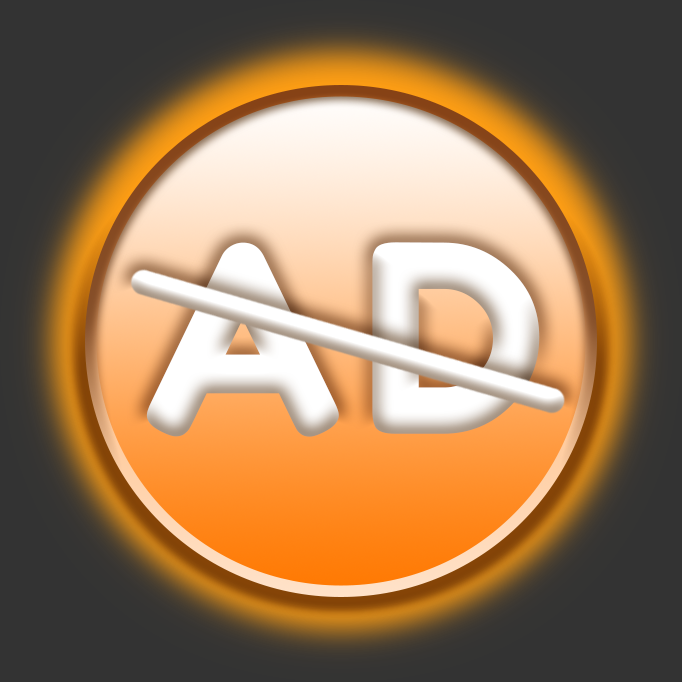
<style>
.page{position:relative;width:682px;height:682px}
.page>*{position:absolute;margin:0}
.t1{font:260.7px "FredokaOne-Regular";letter-spacing:0.075em}
</style>
<div class="page">
<p class="t1" style="left:146px;top:242px;width:394px;height:195px">AD</p>
</div>
